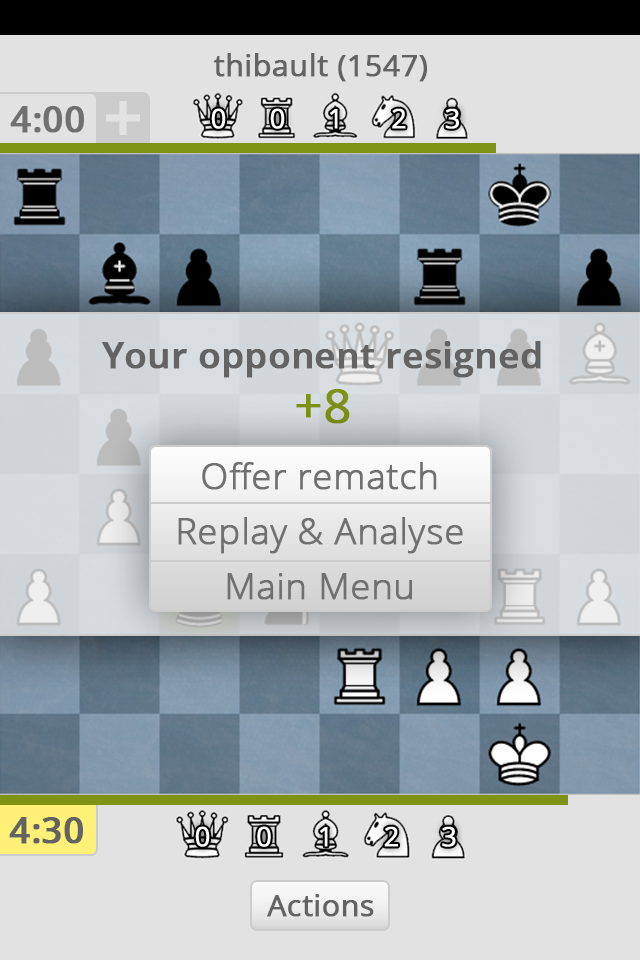
<style>
.page{position:relative;width:640px;height:960px;background:#e2e2e2}
.page>*{position:absolute;margin:0}
.t1{font:30px "OpenSans";color:#636363;font-weight:bold}
.t2{font:36px "OpenSans-Semibold";color:#707070;font-weight:bold}
.t3{font:26.8px "OpenSans";color:#ffffff;font-weight:bold}
.t4{font:36px/48px "OpenSans-Semibold";color:#636363;font-weight:bold}
.t5{font:48px/55px "OpenSans";color:#7e9214;font-weight:bold}
.t6{font:36px/55px "OpenSans-Light";color:#707070;font-weight:bold}
.t7{font:36px "OpenSans-Semibold";color:#636363;font-weight:bold}
</style>
<div class="page">
<p class="t1" style="left:213px;top:53px;width:214px;height:29px">thibault (1547)</p>
<p class="t2" style="left:10px;top:106px;width:74px;height:27px">4:00</p>
<p class="t3" style="left:211px;top:108px;width:15px;height:21px">0</p>
<p class="t3" style="left:270px;top:108px;width:15px;height:21px">0</p>
<p class="t3" style="left:330px;top:109px;width:8px;height:20px">1</p>
<p class="t3" style="left:392px;top:108px;width:14px;height:21px">2</p>
<p class="t3" style="left:445px;top:108px;width:14px;height:21px">3</p>
<p class="t4" style="left:102px;top:341px;width:439px;height:83px;text-align:center">Your opponent resigned<br><span class="t5">+8</span></p>
<p class="t6" style="left:178px;top:462px;width:285px;height:138px;text-align:center">Offer rematch<br>Replay &amp; Analyse<br>Main Menu</p>
<p class="t7" style="left:9px;top:817px;width:74px;height:27px">4:30</p>
<p class="t3" style="left:195px;top:826px;width:15px;height:21px">0</p>
<p class="t3" style="left:257px;top:826px;width:14px;height:21px">0</p>
<p class="t3" style="left:320px;top:827px;width:8px;height:20px">1</p>
<p class="t3" style="left:384px;top:826px;width:14px;height:21px">2</p>
<p class="t3" style="left:442px;top:826px;width:14px;height:21px">3</p>
<p class="t1" style="left:267px;top:894px;width:107px;height:23px">Actions</p>
</div>
